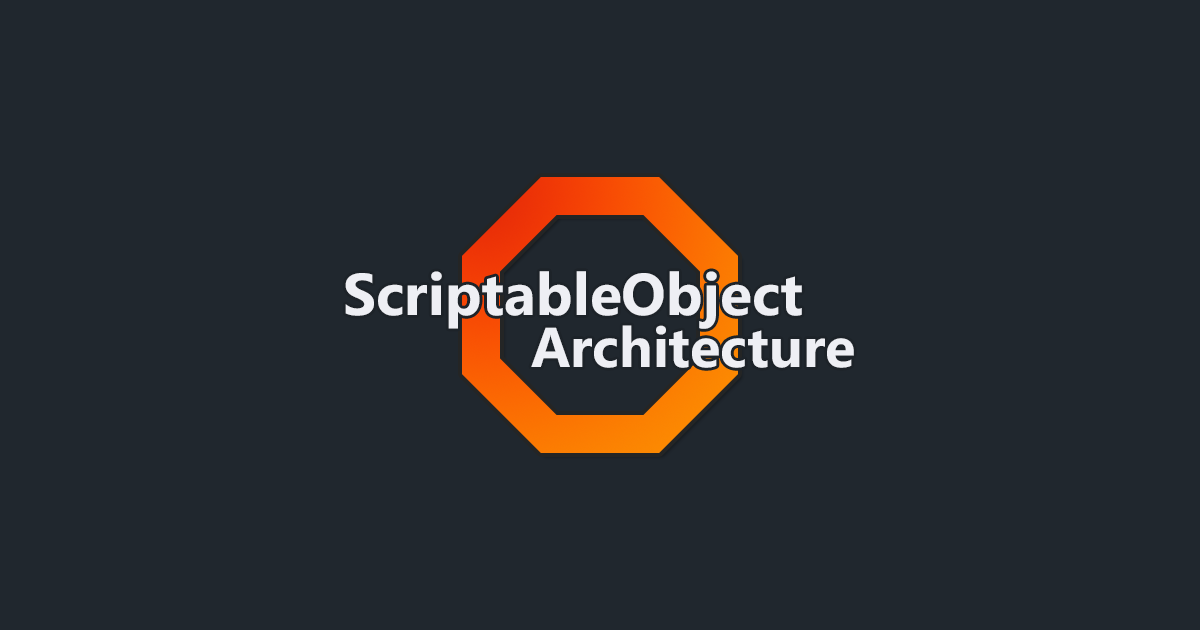
<style>
.page{position:relative;width:1200px;height:630px;background:#20272e}
.page>*{position:absolute;margin:0}
.t1{font:59px "SegoeUI-Bold";color:#eeeff4}
.t2{font:56px "SegoeUI-Bold";color:#eeeff4}
</style>
<div class="page">
<p class="t1" style="left:345px;top:271px;width:457px;height:58px">ScriptableObject</p>
<p class="t2" style="left:531px;top:325px;width:323px;height:43px">Architecture</p>
</div>
